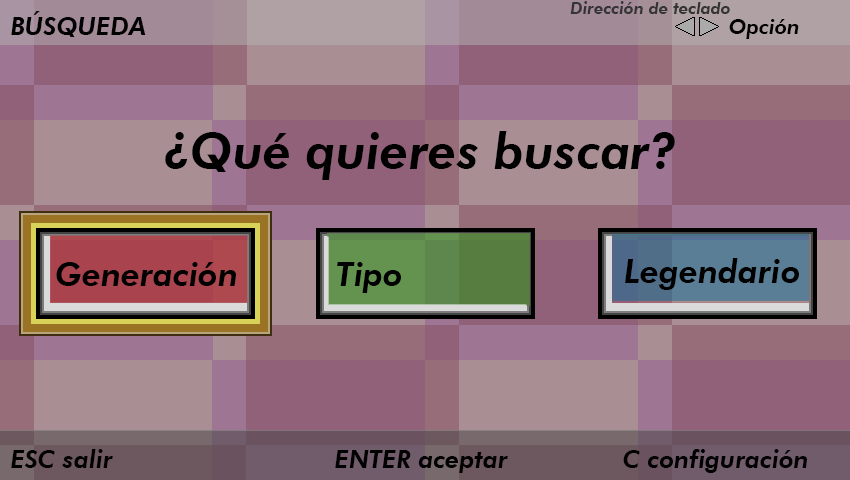
<style>
.page{position:relative;width:850px;height:480px}
.page>*{position:absolute;margin:0}
.t1{font:16.7px "FuturaBT-HeavyItalic";color:#343434}
.t2{font:25px "FuturaBT-HeavyItalic";color:#000000}
.t3{font:20.8px "FuturaBT-HeavyItalic";color:#000000}
.t4{font:50px "FuturaBT-HeavyItalic";color:#000000}
.t5{font:33.3px "FuturaBT-HeavyItalic";color:#000000}
</style>
<div class="page">
<p class="t1" style="left:570px;top:1px;width:160px;height:13px">Dirección de teclado</p>
<p class="t2" style="left:11px;top:11px;width:135px;height:26px">BÚSQUEDA</p>
<p class="t3" style="left:729px;top:19px;width:70px;height:20px">Opción</p>
<p class="t4" style="left:165px;top:131px;width:510px;height:49px">¿Qué quieres buscar?</p>
<p class="t5" style="left:56px;top:262px;width:180px;height:24px">Generación</p>
<p class="t5" style="left:337px;top:262px;width:64px;height:31px">Tipo</p>
<p class="t5" style="left:625px;top:258px;width:174px;height:32px">Legendario</p>
<p class="t2" style="left:11px;top:449px;width:796px;height:24px">ESC salir         ENTER aceptar      C configuración</p>
</div>
